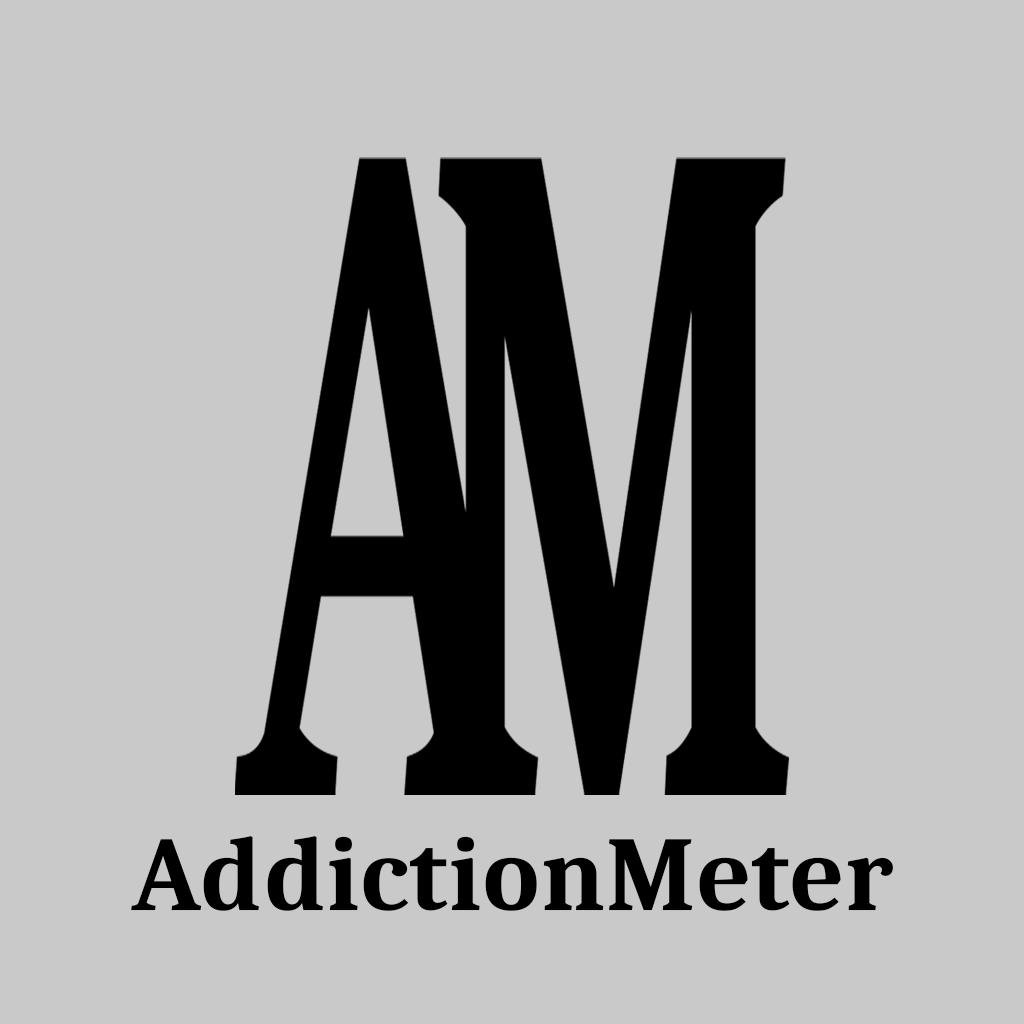
<style>
.page{position:relative;width:1024px;height:1024px;background:#c9c9c9}
.page>*{position:absolute;margin:0}
.t1{font:106px "Caladea-Bold";color:#000000}
</style>
<div class="page">
<p class="t1" style="left:131px;top:836px;width:762px;height:75px">AddictionMeter</p>
</div>
